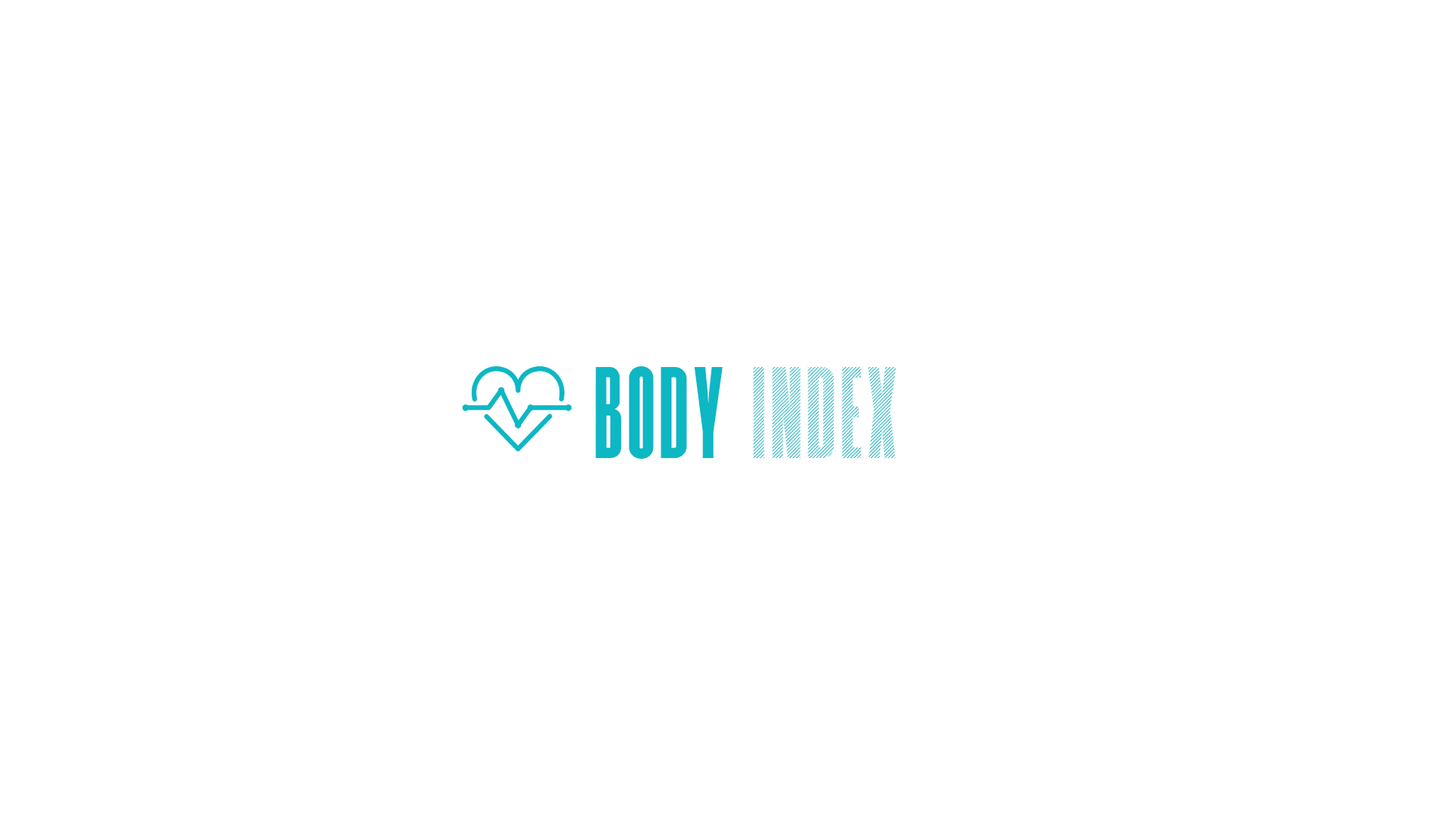
<style>
.page{position:relative;width:1456px;height:819px;background:#ffffff}
.page>*{position:absolute;margin:0}
.t1{font:113.7px "Superline-Line";letter-spacing:0.05em;color:#0db7c4}
.t2{font:113.7px "Superline-Regular";letter-spacing:0.05em;color:#0db7c4}
</style>
<div class="page">
<p class="t1" style="left:595px;top:366px;width:301px;height:93px"><span class="t2">Body </span>Index</p>
</div>
